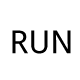
<style>
.page{position:relative;width:80px;height:80px;background:#ffffff}
.page>*{position:absolute;margin:0}
.t1{font:31.8px "DroidSans";color:#000000}
</style>
<div class="page">
<p class="t1" style="left:12px;top:30px;width:59px;height:24px">RUN</p>
</div>
